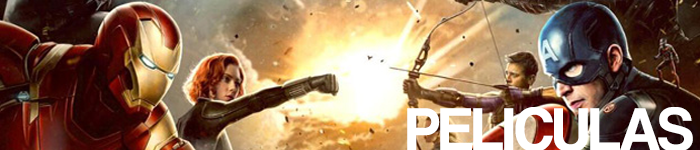
<style>
.page{position:relative;width:700px;height:150px}
.page>*{position:absolute;margin:0}
.t1{font:63px "CoolveticaRg-Regular";color:#ffffff}
</style>
<div class="page">
<p class="t1" style="left:407px;top:107px;width:286px;height:45px">PELICULAS</p>
</div>
